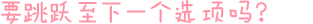
<style>
.page{position:relative;width:313px;height:24px;background:#ffffff}
.page>*{position:absolute;margin:0}
.t1{font:28px "¢è?";color:#ff93a5}
</style>
<div class="page">
<p class="t1" style="left:1px;top:0px;width:266px;height:24px">要跳跃至下一个选项吗？</p>
</div>
